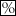
<style>
.page{position:relative;width:16px;height:16px;background:#ffffff}
.page>*{position:absolute;margin:0}
.t1{font:16px "GoudyOldStyleT-Regular";color:#000000}
</style>
<div class="page">
<p class="t1" style="left:2px;top:2px;width:13px;height:12px">%</p>
</div>
